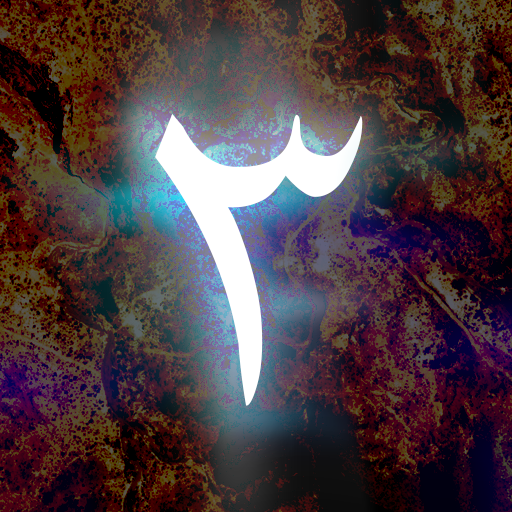
<style>
.page{position:relative;width:512px;height:512px}
.page>*{position:absolute;margin:0}
.t1{font:539px "Damascus";color:#ffffff}
</style>
<div class="page">
<p class="t1" style="left:155px;top:114px;width:208px;height:292px">۳</p>
</div>
